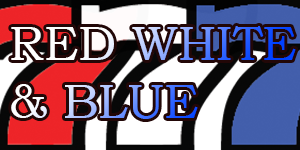
<style>
.page{position:relative;width:300px;height:150px}
.page>*{position:absolute;margin:0}
.t1{font:48px "BookmanOldStyle"}
</style>
<div class="page">
<p class="t1" style="left:11px;top:26px;width:285px;height:93px">RED WHITE<br>&amp; BLUE</p>
</div>
